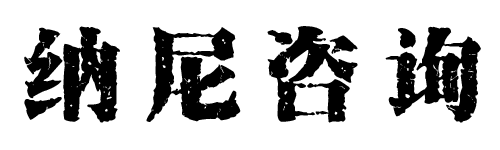
<style>
.page{position:relative;width:500px;height:150px;background:#ffffff}
.page>*{position:absolute;margin:0}
.t1{font:100px "SXSGYS";letter-spacing:0.2em;color:#000000}
</style>
<div class="page">
<p class="t1" style="left:24px;top:26px;width:457px;height:97px">纳尼咨询</p>
</div>
